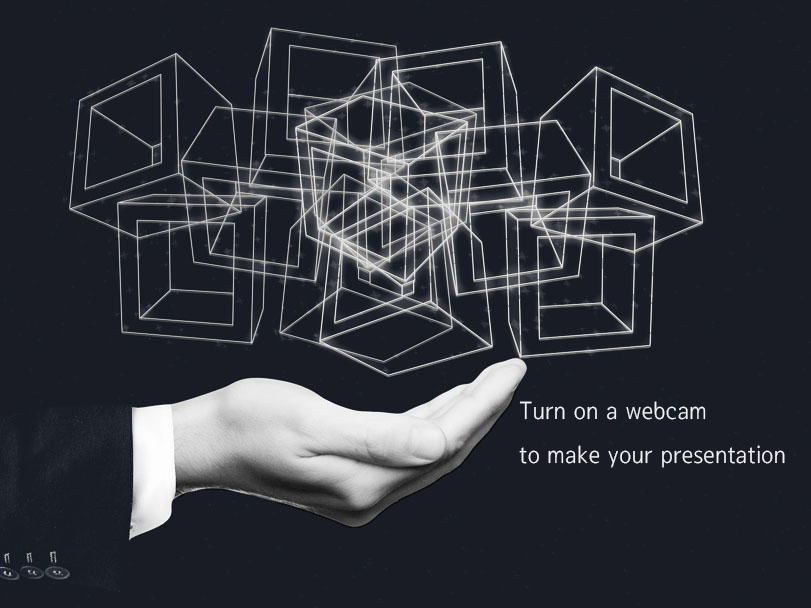
<style>
.page{position:relative;width:811px;height:608px;background:#191c25}
.page>*{position:absolute;margin:0}
.t1{font:25px "SeN-CL";color:#f0f2f5}
</style>
<div class="page">
<p class="t1" style="left:519px;top:401px;width:266px;height:67px">Turn on a webcam<br>to make your presentation</p>
</div>
